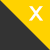
<style>
.page{position:relative;width:50px;height:50px;background:#333333}
.page>*{position:absolute;margin:0}
.t1{font:27.8px "YDIYGO330";letter-spacing:0.01em;color:#ffffff}
</style>
<div class="page">
<p class="t1" style="left:29px;top:6px;width:14px;height:15px">x</p>
</div>
